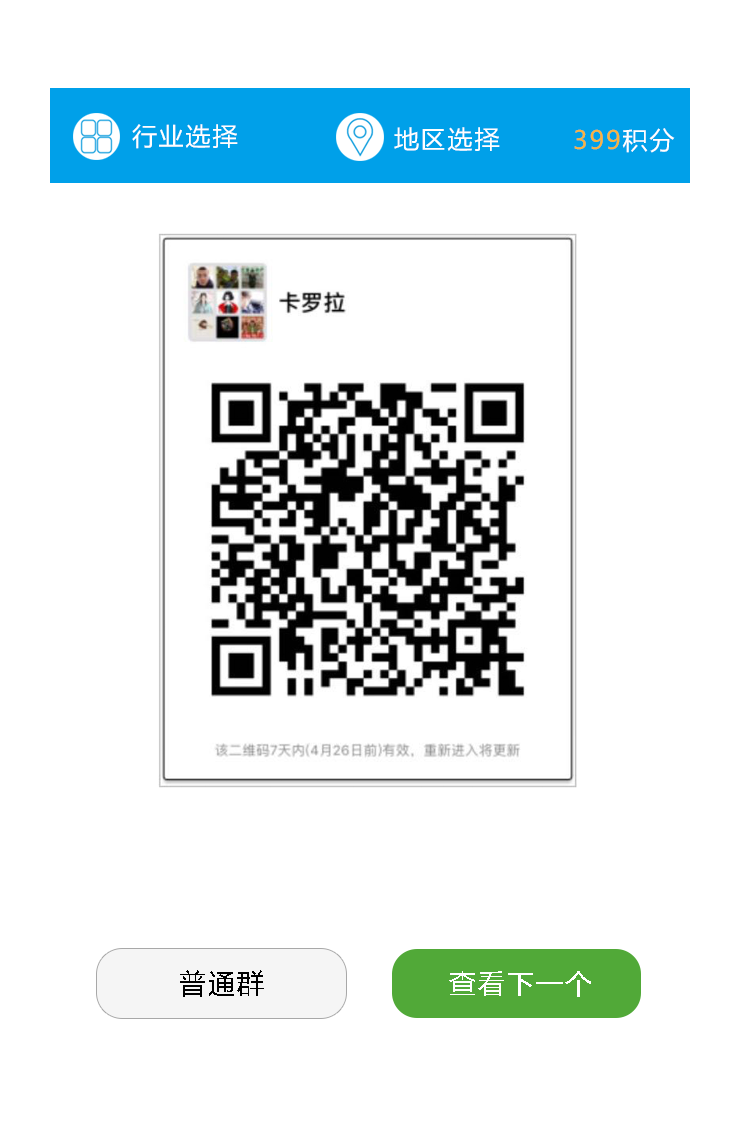
<style>
.page{position:relative;width:740px;height:1136px;background:#ffffff}
.page>*{position:absolute;margin:0}
.t1{font:25px "MicrosoftYaHei";letter-spacing:0.08em;color:#ffffff}
.t2{font:25px "MicrosoftYaHei";letter-spacing:0.08em;color:#fab43c}
.t3{font:27.3px "MicrosoftYaHei";letter-spacing:0.08em;color:#000000}
.t4{font:27.3px "MicrosoftYaHei";letter-spacing:0.08em;color:#ffffff}
</style>
<div class="page">
<p class="t1" style="left:132px;top:124px;width:106px;height:25px">行业选择</p>
<p class="t1" style="left:394px;top:127px;width:106px;height:24px">地区选择</p>
<p class="t2" style="left:574px;top:128px;width:101px;height:25px">399<span class="t1">积分</span></p>
<p class="t3" style="left:180px;top:970px;width:84px;height:27px">普通群</p>
<p class="t4" style="left:449px;top:971px;width:142px;height:26px">查看下一个</p>
</div>
